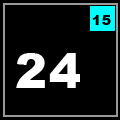
<style>
.page{position:relative;width:120px;height:120px;background:#000000}
.page>*{position:absolute;margin:0}
.t1{font:14px "Arial-Black";letter-spacing:0.05em;color:#000000}
.t2{font:48px "Arial-Black";letter-spacing:0.05em;color:#ffffff}
</style>
<div class="page">
<p class="t1" style="left:92px;top:15px;width:19px;height:10px">15</p>
<p class="t2" style="left:16px;top:53px;width:64px;height:35px">24</p>
</div>
